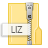
<style>
.page{position:relative;width:48px;height:48px;background:#ffffff}
.page>*{position:absolute;margin:0}
.t1{font:9px "SegoeUI";color:#64635e}
</style>
<div class="page">
<p class="t1" style="left:11px;top:26px;width:12px;height:7px">LIZ</p>
</div>
